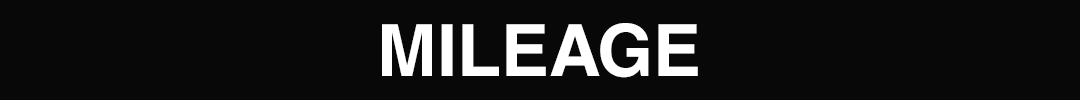
<style>
.page{position:relative;width:1080px;height:100px;background:#080808}
.page>*{position:absolute;margin:0}
.t1{font:72px "HelveticaCE-Bold";color:#ffffff;text-transform:uppercase}
</style>
<div class="page">
<p class="t1" style="left:382px;top:23px;width:316px;height:55px">MILEAGE</p>
</div>
